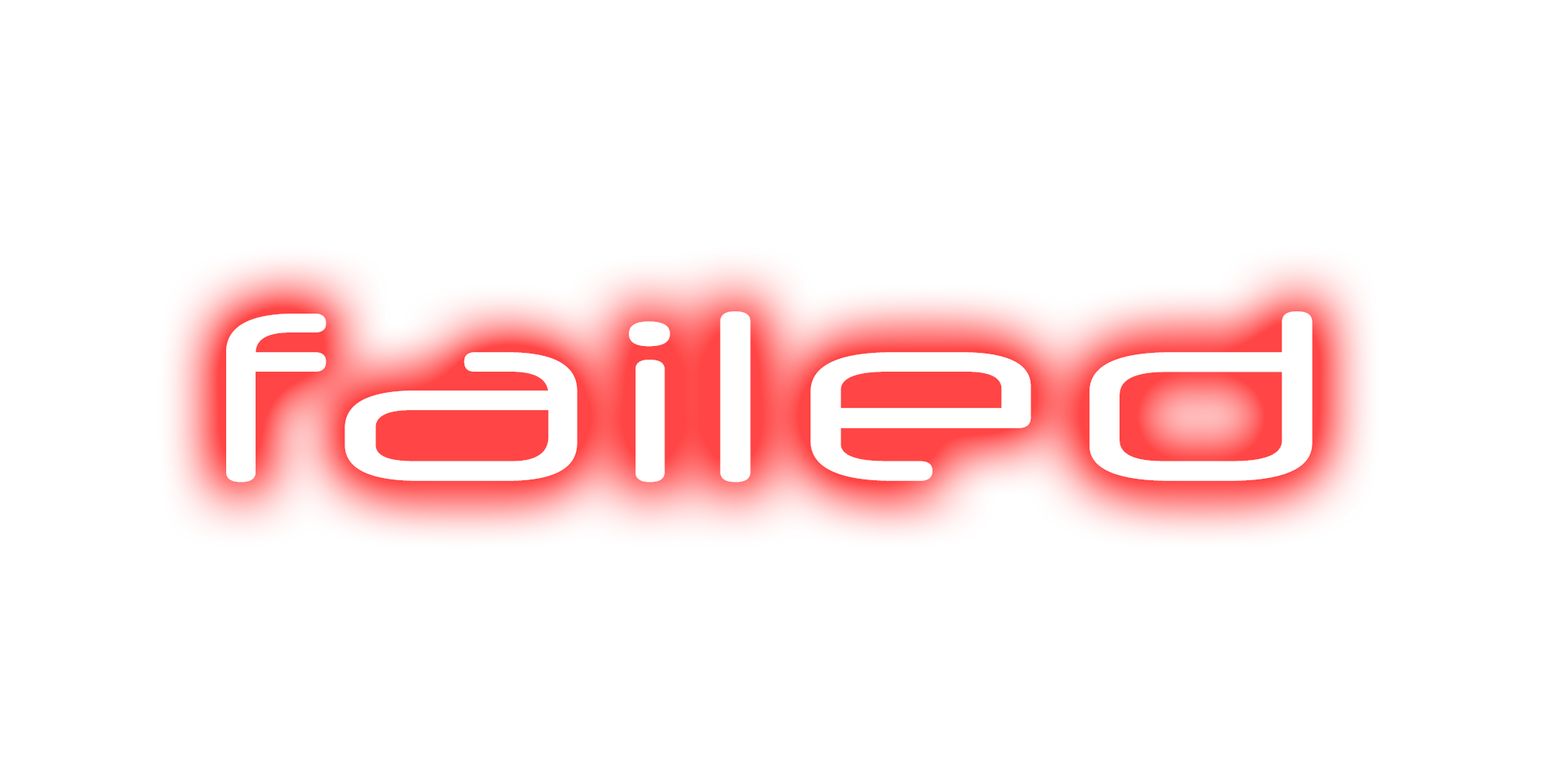
<style>
.page{position:relative;width:1544px;height:772px;background:#ffffff}
.page>*{position:absolute;margin:0}
.t1{font:240.4px "NeuropolXFree";color:#ffffff;scale:1.28 1}
</style>
<div class="page">
<p class="t1" style="left:226px;top:311px;width:1087px;height:172px">failed</p>
</div>
